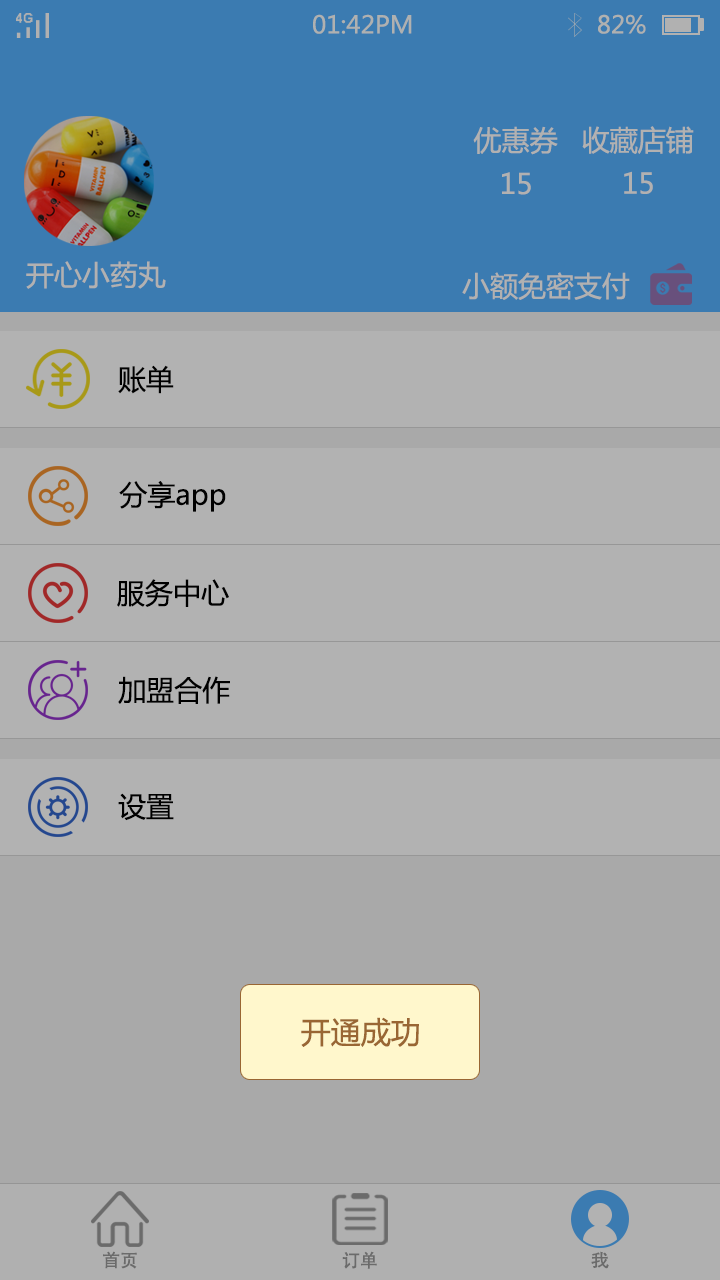
<style>
.page{position:relative;width:720px;height:1280px;background:#b2b2b2}
.page>*{position:absolute;margin:0}
.t1{font:24px "MicrosoftYaHei";color:#afb1b0}
.t2{font:28.1px "MicrosoftYaHei";color:#b2b1b1}
.t3{font:28px "MicrosoftYaHei";color:#b2b1b1}
.t4{font:28px "MicrosoftYaHei";color:#000000}
.t5{font:30px "MicrosoftYaHei";color:#996633}
.t6{font:18px "AdobeHeitiStd-Regular";color:#6b6b6b}
.t7{font:18px "AdobeHeitiStd-Regular";color:#6b6b6b;scale:1.05 1}
</style>
<div class="page">
<p class="t1" style="left:313px;top:14px;width:99px;height:20px">01:42PM</p>
<p class="t1" style="left:598px;top:14px;width:48px;height:20px">82%</p>
<p class="t2" style="left:473px;top:126px;width:85px;height:29px">优惠券</p>
<p class="t3" style="left:582px;top:126px;width:112px;height:28px">收藏店铺</p>
<p class="t2" style="left:502px;top:172px;width:29px;height:23px">15</p>
<p class="t3" style="left:624px;top:171px;width:29px;height:23px">15</p>
<p class="t3" style="left:26px;top:261px;width:140px;height:28px">开心小药丸</p>
<p class="t3" style="left:462px;top:272px;width:168px;height:28px">小额免密支付</p>
<p class="t4" style="left:118px;top:365px;width:56px;height:29px">账单</p>
<p class="t4" style="left:119px;top:481px;width:107px;height:31px">分享app</p>
<p class="t4" style="left:117px;top:579px;width:112px;height:28px">服务中心</p>
<p class="t4" style="left:118px;top:676px;width:112px;height:28px">加盟合作</p>
<p class="t4" style="left:118px;top:793px;width:56px;height:28px">设置</p>
<p class="t5" style="left:301px;top:1017px;width:118px;height:30px">开通成功</p>
<p class="t6" style="left:103px;top:1251px;width:34px;height:18px">首页</p>
<p class="t6" style="left:342px;top:1251px;width:35px;height:18px">订单</p>
<p class="t7" style="left:591px;top:1251px;width:18px;height:18px">我</p>
</div>
